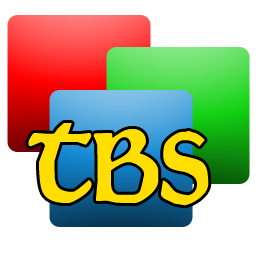
<style>
.page{position:relative;width:256px;height:256px;background:#ffffff}
.page>*{position:absolute;margin:0}
.t1{font:120px "Martel";color:#ffde00}
</style>
<div class="page">
<p class="t1" style="left:28px;top:123px;width:181px;height:83px">TBS</p>
</div>
